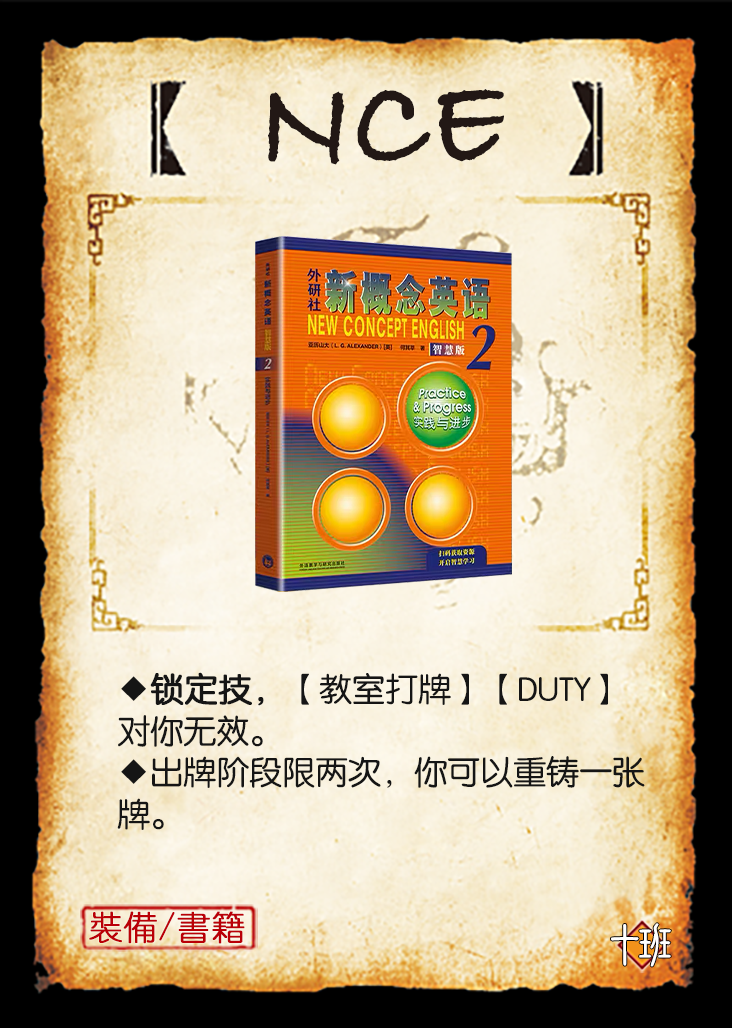
<style>
.page{position:relative;width:732px;height:1028px}
.page>*{position:absolute;margin:0}
.t1{font:129.2px "BradleyHandITCTT-Bold";color:#221815;scale:0.95 1}
.t2{font:33.3px/41.7px "FZY3JW--GB1-0";letter-spacing:-0.01em;color:#151515}
.t3{font:33.3px/41.7px "FZY3JW--GB1-0";letter-spacing:-0.01em;color:#151515;font-weight:bold}
.t4{font:33.3px "YouYuan";color:#ba0007;font-weight:bold}
.t5{font:50px "DFNewChuan-W5-WINP-BF";letter-spacing:-0.4em;color:#ffffff}
</style>
<div class="page">
<p class="t1" style="left:268px;top:89px;width:236px;height:76px">NCE</p>
<p class="t2" style="left:117px;top:672px;width:528px;height:158px">◆<span class="t3">锁定技，</span>【教室打牌】【DUTY】<br>对你无效。<br>◆出牌阶段限两次，你可以重铸一张<br>牌。</p>
<p class="t4" style="left:89px;top:911px;width:156px;height:33px">裝備/書籍</p>
<p class="t5" style="left:611px;top:923px;width:60px;height:44px">十班</p>
</div>
